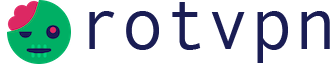
<style>
.page{position:relative;width:336px;height:64px;background:#ffffff}
.page>*{position:absolute;margin:0}
.t1{font:72px "AndaleMono";color:#1a1d54}
</style>
<div class="page">
<p class="t1" style="left:89px;top:2px;width:241px;height:61px">rotvpn</p>
</div>
